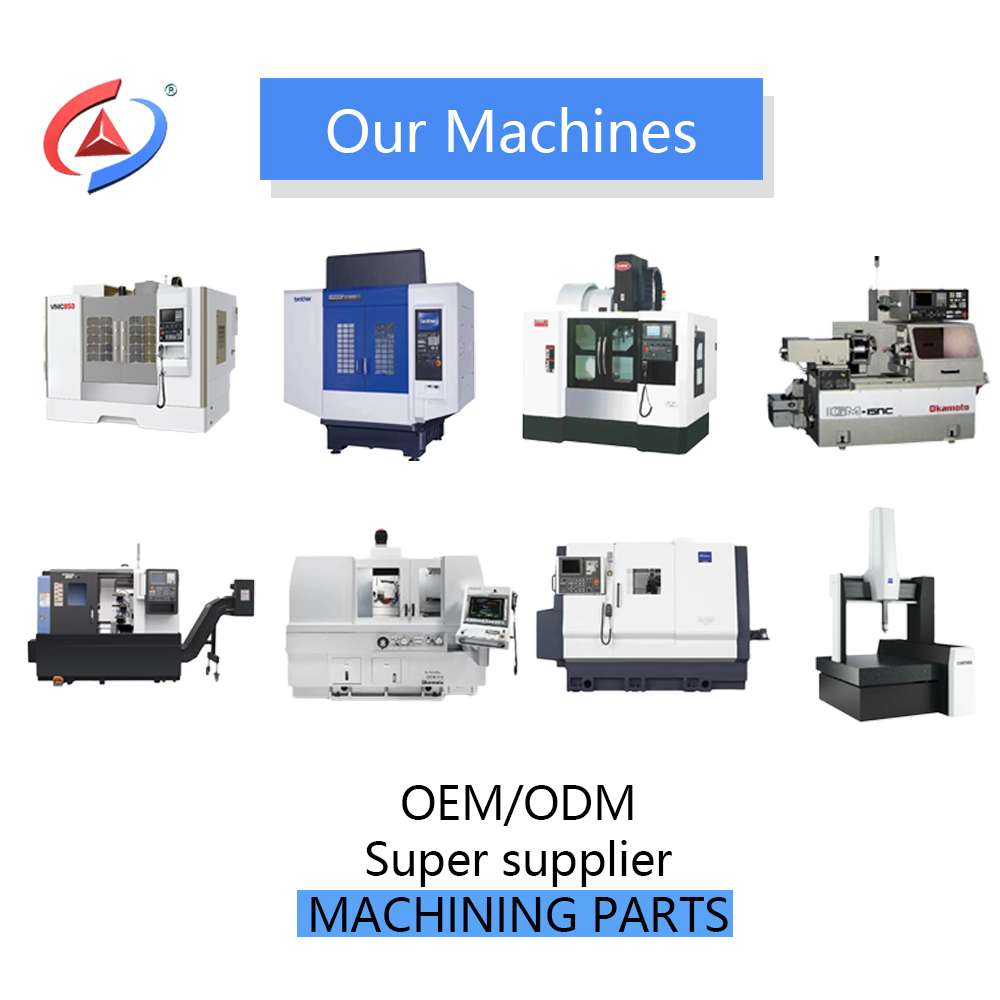
<style>
.page{position:relative;width:1000px;height:1000px;background:#ffffff}
.page>*{position:absolute;margin:0}
.t1{font:55.9px "MicrosoftYaHei";color:#ffffff}
.t2{font:44.5px/55.9px "MicrosoftYaHei";color:#000000}
</style>
<div class="page">
<p class="t1" style="left:327px;top:107px;width:369px;height:46px">Our Machines</p>
<p class="t2" style="left:311px;top:785px;width:417px;height:147px;text-align:center">OEM/ODM<br>Super supplier<br>MACHINING PARTS</p>
</div>
